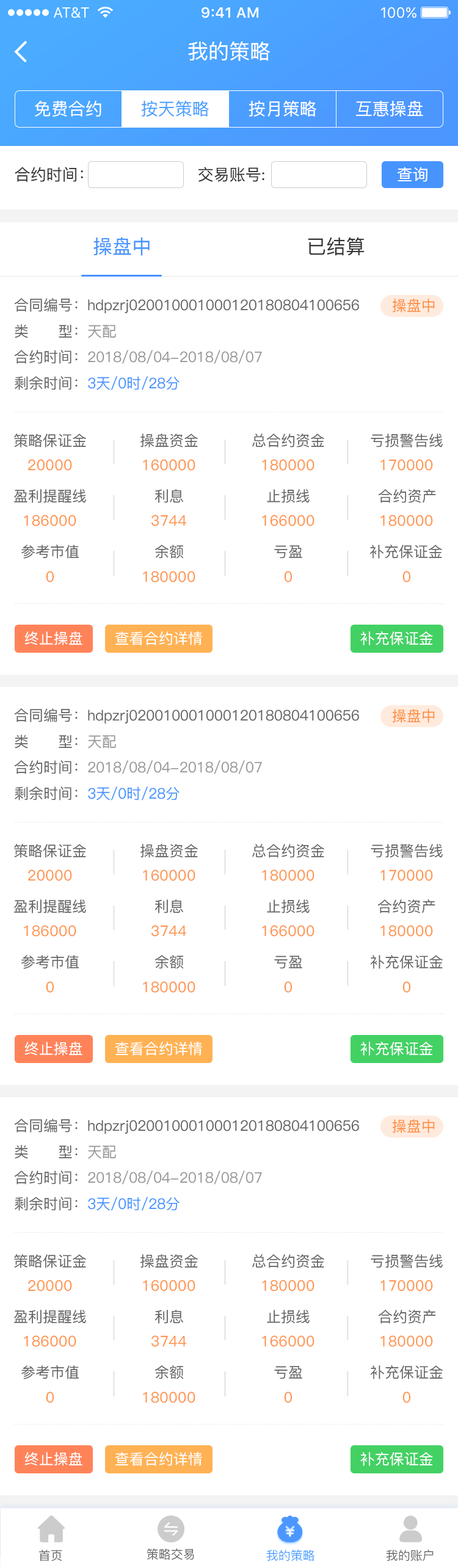
<style>
.page{position:relative;width:458px;height:1568px;background:#ffffff}
.page>*{position:absolute;margin:0}
.t1{font:20.8px "PingFang-SC-Medium";color:#ffffff}
.t2{font:17.1px "PingFang-SC-Medium";color:#ffffff}
.t3{font:17.1px "PingFang-SC-Medium";color:#4ba0ff}
.t4{font:15.9px "PingFang-SC-Medium";color:#333333}
.t5{font:15.9px "PingFang-SC-Medium";color:#ffffff}
.t6{font:19.5px "PingFang-SC-Medium";color:#4794ff}
.t7{font:19.5px "PingFang-SC-Medium";color:#333333}
.t8{font:14.7px "PingFang-SC-Medium";color:#666666}
.t9{font:14.7px "PingFang-SC-Medium";color:#ff8e42}
.t10{font:14.7px "PingFang-SC-Medium";color:#999999}
.t11{font:14.7px "PingFang-SC-Medium";color:#4794ff}
.t12{font:14.7px "PingFang-SC-Medium";color:#ffffff}
.t13{font:12.2px "PingFang-SC-Medium";color:#666666}
.t14{font:12.2px "PingFang-SC-Medium";color:#4b9fff}
</style>
<div class="page">
<p class="t1" style="left:188px;top:41px;width:82px;height:20px">我的策略</p>
<p class="t2" style="left:35px;top:101px;width:66px;height:16px">免费合约</p>
<p class="t3" style="left:141px;top:100px;width:68px;height:17px">按天策略</p>
<p class="t2" style="left:249px;top:100px;width:67px;height:17px">按月策略</p>
<p class="t2" style="left:356px;top:100px;width:67px;height:17px">互惠操盘</p>
<p class="t4" style="left:15px;top:167px;width:68px;height:15px">合约时间：</p>
<p class="t4" style="left:198px;top:167px;width:66px;height:15px">交易账号:</p>
<p class="t5" style="left:397px;top:167px;width:30px;height:15px">查询</p>
<p class="t6" style="left:93px;top:237px;width:57px;height:19px">操盘中</p>
<p class="t7" style="left:308px;top:237px;width:57px;height:19px">已结算</p>
<p class="t8" style="left:14px;top:298px;width:345px;height:15px">合同编号：hdpzrj020010001000120180804100656</p>
<p class="t9" style="left:392px;top:299px;width:43px;height:14px">操盘中</p>
<p class="t8" style="left:15px;top:324px;width:101px;height:14px">类      型：<span class="t10">天配</span></p>
<p class="t10" style="left:14px;top:350px;width:248px;height:14px"><span class="t8">合约时间：</span>2018/08/04-2018/08/07</p>
<p class="t11" style="left:15px;top:376px;width:165px;height:14px"><span class="t8">剩余时间：</span>3天/0时/28分</p>
<p class="t8" style="left:14px;top:434px;width:72px;height:14px">策略保证金</p>
<p class="t8" style="left:140px;top:434px;width:58px;height:14px">操盘资金</p>
<p class="t8" style="left:252px;top:434px;width:72px;height:14px">总合约资金</p>
<p class="t8" style="left:371px;top:434px;width:72px;height:14px">亏损警告线</p>
<p class="t9" style="left:28px;top:459px;width:44px;height:12px">20000</p>
<p class="t9" style="left:143px;top:459px;width:52px;height:12px">160000</p>
<p class="t9" style="left:262px;top:459px;width:52px;height:12px">180000</p>
<p class="t9" style="left:380px;top:459px;width:53px;height:12px">170000</p>
<p class="t8" style="left:14px;top:489px;width:72px;height:14px">盈利提醒线</p>
<p class="t8" style="left:155px;top:489px;width:28px;height:14px">利息</p>
<p class="t8" style="left:267px;top:489px;width:43px;height:14px">止损线</p>
<p class="t8" style="left:378px;top:489px;width:58px;height:14px">合约资产</p>
<p class="t9" style="left:24px;top:515px;width:52px;height:11px">186000</p>
<p class="t9" style="left:151px;top:515px;width:36px;height:11px">3744</p>
<p class="t9" style="left:262px;top:515px;width:52px;height:11px">166000</p>
<p class="t9" style="left:380px;top:515px;width:53px;height:11px">180000</p>
<p class="t8" style="left:21px;top:545px;width:58px;height:14px">参考市值</p>
<p class="t8" style="left:154px;top:545px;width:30px;height:14px">余额</p>
<p class="t8" style="left:274px;top:545px;width:28px;height:14px">亏盈</p>
<p class="t8" style="left:370px;top:545px;width:72px;height:14px">补充保证金</p>
<p class="t9" style="left:46px;top:571px;width:8px;height:12px">0</p>
<p class="t9" style="left:143px;top:571px;width:52px;height:12px">180000</p>
<p class="t9" style="left:284px;top:571px;width:8px;height:12px">0</p>
<p class="t9" style="left:402px;top:571px;width:9px;height:12px">0</p>
<p class="t12" style="left:24px;top:631px;width:58px;height:14px">终止操盘</p>
<p class="t12" style="left:115px;top:631px;width:87px;height:14px">查看合约详情</p>
<p class="t12" style="left:360px;top:631px;width:73px;height:14px">补充保证金</p>
<p class="t8" style="left:14px;top:708px;width:345px;height:16px">合同编号：hdpzrj020010001000120180804100656</p>
<p class="t9" style="left:392px;top:709px;width:43px;height:14px">操盘中</p>
<p class="t8" style="left:15px;top:735px;width:101px;height:14px">类      型：<span class="t10">天配</span></p>
<p class="t10" style="left:14px;top:760px;width:248px;height:14px"><span class="t8">合约时间：</span>2018/08/04-2018/08/07</p>
<p class="t11" style="left:15px;top:786px;width:165px;height:14px"><span class="t8">剩余时间：</span>3天/0时/28分</p>
<p class="t8" style="left:14px;top:844px;width:72px;height:14px">策略保证金</p>
<p class="t8" style="left:140px;top:844px;width:58px;height:14px">操盘资金</p>
<p class="t8" style="left:252px;top:844px;width:72px;height:14px">总合约资金</p>
<p class="t8" style="left:371px;top:844px;width:72px;height:14px">亏损警告线</p>
<p class="t9" style="left:28px;top:869px;width:44px;height:12px">20000</p>
<p class="t9" style="left:143px;top:869px;width:52px;height:12px">160000</p>
<p class="t9" style="left:262px;top:869px;width:52px;height:12px">180000</p>
<p class="t9" style="left:380px;top:869px;width:53px;height:12px">170000</p>
<p class="t8" style="left:14px;top:899px;width:72px;height:14px">盈利提醒线</p>
<p class="t8" style="left:155px;top:899px;width:28px;height:14px">利息</p>
<p class="t8" style="left:267px;top:899px;width:43px;height:14px">止损线</p>
<p class="t8" style="left:377px;top:899px;width:58px;height:14px">合约资产</p>
<p class="t9" style="left:24px;top:925px;width:52px;height:12px">186000</p>
<p class="t9" style="left:151px;top:925px;width:36px;height:12px">3744</p>
<p class="t9" style="left:262px;top:925px;width:52px;height:12px">166000</p>
<p class="t9" style="left:380px;top:925px;width:53px;height:12px">180000</p>
<p class="t8" style="left:21px;top:955px;width:58px;height:14px">参考市值</p>
<p class="t8" style="left:154px;top:955px;width:30px;height:14px">余额</p>
<p class="t8" style="left:274px;top:956px;width:28px;height:13px">亏盈</p>
<p class="t8" style="left:371px;top:955px;width:72px;height:14px">补充保证金</p>
<p class="t9" style="left:46px;top:981px;width:8px;height:12px">0</p>
<p class="t9" style="left:143px;top:981px;width:52px;height:12px">180000</p>
<p class="t9" style="left:284px;top:981px;width:8px;height:12px">0</p>
<p class="t9" style="left:402px;top:981px;width:9px;height:12px">0</p>
<p class="t12" style="left:24px;top:1042px;width:58px;height:14px">终止操盘</p>
<p class="t12" style="left:115px;top:1042px;width:87px;height:14px">查看合约详情</p>
<p class="t12" style="left:360px;top:1042px;width:73px;height:14px">补充保证金</p>
<p class="t8" style="left:14px;top:1119px;width:345px;height:15px">合同编号：hdpzrj020010001000120180804100656</p>
<p class="t9" style="left:392px;top:1119px;width:43px;height:14px">操盘中</p>
<p class="t8" style="left:15px;top:1145px;width:101px;height:14px">类      型：<span class="t10">天配</span></p>
<p class="t10" style="left:14px;top:1171px;width:248px;height:14px"><span class="t8">合约时间：</span>2018/08/04-2018/08/07</p>
<p class="t11" style="left:15px;top:1197px;width:165px;height:14px"><span class="t8">剩余时间：</span>3天/0时/28分</p>
<p class="t8" style="left:14px;top:1254px;width:72px;height:14px">策略保证金</p>
<p class="t8" style="left:140px;top:1254px;width:58px;height:14px">操盘资金</p>
<p class="t8" style="left:252px;top:1254px;width:72px;height:14px">总合约资金</p>
<p class="t8" style="left:371px;top:1254px;width:72px;height:14px">亏损警告线</p>
<p class="t9" style="left:28px;top:1280px;width:44px;height:11px">20000</p>
<p class="t9" style="left:143px;top:1280px;width:52px;height:11px">160000</p>
<p class="t9" style="left:262px;top:1280px;width:52px;height:11px">180000</p>
<p class="t9" style="left:380px;top:1280px;width:53px;height:11px">170000</p>
<p class="t8" style="left:14px;top:1310px;width:72px;height:14px">盈利提醒线</p>
<p class="t8" style="left:155px;top:1310px;width:28px;height:14px">利息</p>
<p class="t8" style="left:267px;top:1310px;width:43px;height:14px">止损线</p>
<p class="t8" style="left:378px;top:1310px;width:58px;height:14px">合约资产</p>
<p class="t9" style="left:24px;top:1335px;width:52px;height:12px">186000</p>
<p class="t9" style="left:151px;top:1335px;width:36px;height:12px">3744</p>
<p class="t9" style="left:262px;top:1335px;width:52px;height:12px">166000</p>
<p class="t9" style="left:380px;top:1335px;width:53px;height:12px">180000</p>
<p class="t8" style="left:21px;top:1365px;width:58px;height:14px">参考市值</p>
<p class="t8" style="left:154px;top:1365px;width:30px;height:14px">余额</p>
<p class="t8" style="left:274px;top:1366px;width:28px;height:13px">亏盈</p>
<p class="t8" style="left:371px;top:1365px;width:72px;height:14px">补充保证金</p>
<p class="t9" style="left:46px;top:1392px;width:8px;height:11px">0</p>
<p class="t9" style="left:143px;top:1392px;width:52px;height:11px">180000</p>
<p class="t9" style="left:284px;top:1392px;width:8px;height:11px">0</p>
<p class="t9" style="left:402px;top:1392px;width:9px;height:11px">0</p>
<p class="t12" style="left:24px;top:1452px;width:58px;height:14px">终止操盘</p>
<p class="t12" style="left:115px;top:1452px;width:87px;height:14px">查看合约详情</p>
<p class="t12" style="left:360px;top:1452px;width:73px;height:14px">补充保证金</p>
<p class="t13" style="left:39px;top:1550px;width:23px;height:11px">首页</p>
<p class="t13" style="left:147px;top:1548px;width:47px;height:12px">策略交易</p>
<p class="t14" style="left:266px;top:1550px;width:48px;height:11px">我的策略</p>
<p class="t13" style="left:386px;top:1550px;width:48px;height:11px">我的账户</p>
</div>
